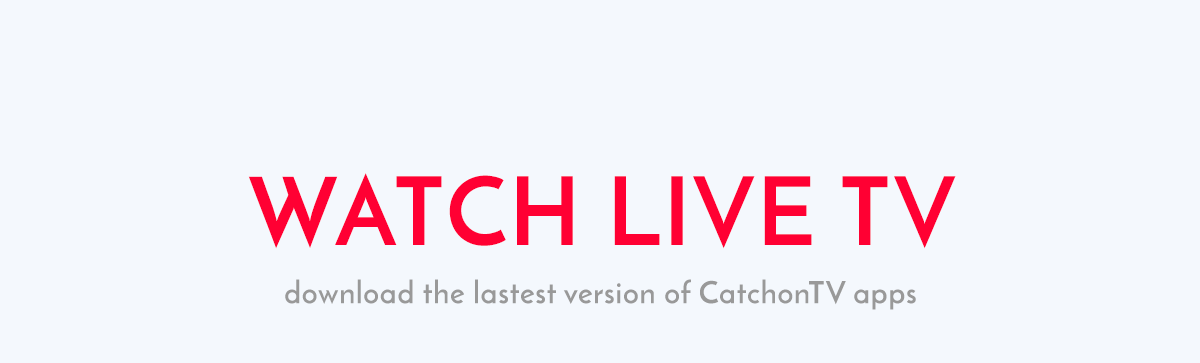
<style>
.page{position:relative;width:1200px;height:363px;background:#f4f8fd}
.page>*{position:absolute;margin:0}
.t1{font:94.2px "JosefinSans-Bold";letter-spacing:0.025em;color:#ff0033}
.t2{font:30.8px "JosefinSans-Bold";letter-spacing:0.025em;color:#999999}
</style>
<div class="page">
<p class="t1" style="left:248px;top:173px;width:708px;height:76px">WATCH LIVE TV</p>
<p class="t2" style="left:285px;top:279px;width:631px;height:31px">download the lastest version of CatchonTV apps</p>
</div>
